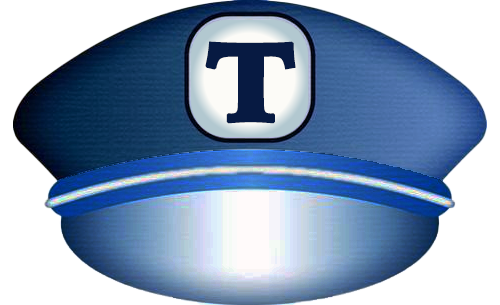
<style>
.page{position:relative;width:500px;height:305px;background:#ffffff}
.page>*{position:absolute;margin:0}
.t1{font:112.6px "IowanOldStyle-Black";letter-spacing:0.1em;color:#071a42;font-weight:bold}
</style>
<div class="page">
<p class="t1" style="left:205px;top:41px;width:91px;height:83px">T</p>
</div>
